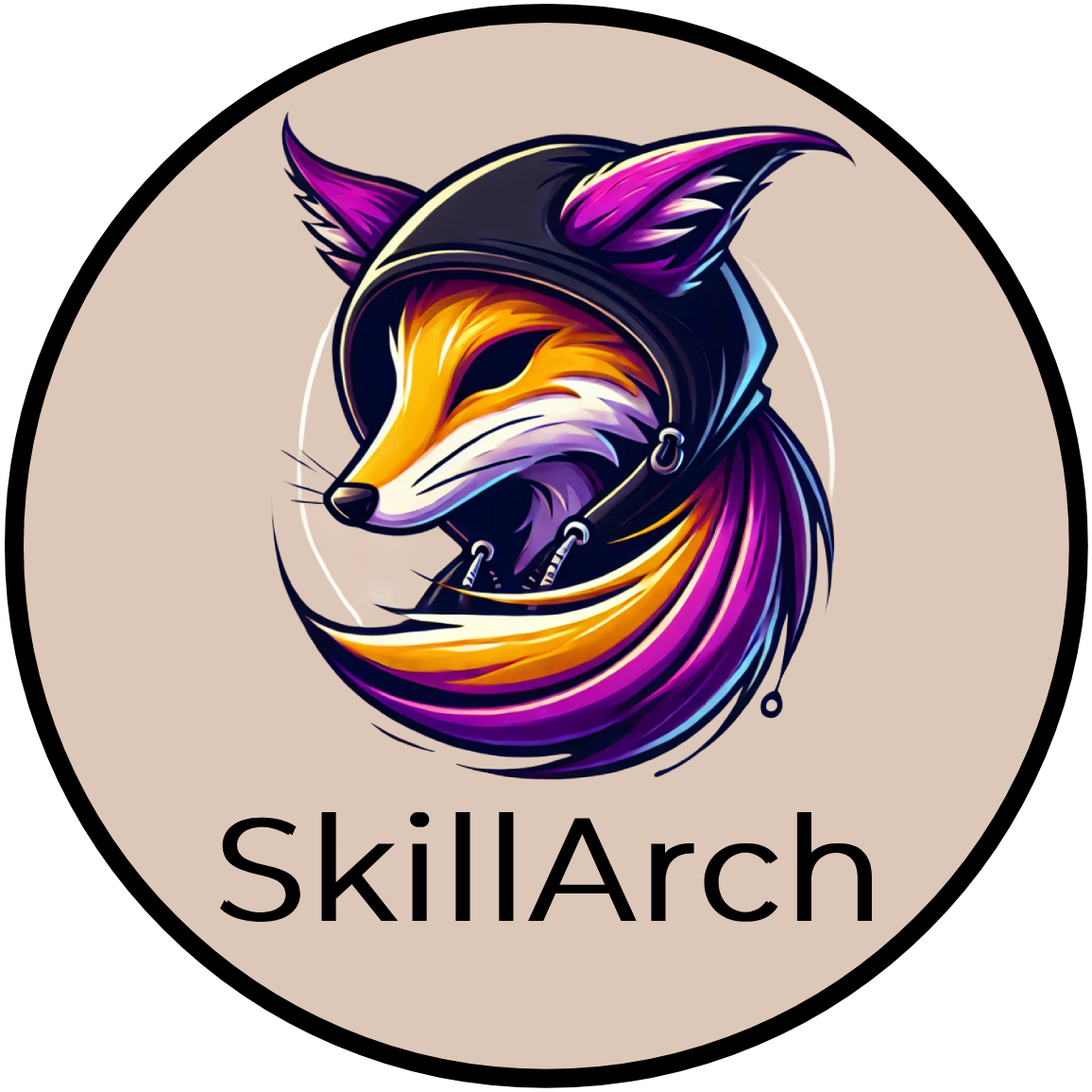
<style>
.page{position:relative;width:1092px;height:1092px;background:#ddc7b8}
.page>*{position:absolute;margin:0}
.t1{font:146.4px "Montserrat-Regular";color:#000000;font-weight:bold}
</style>
<div class="page">
<p class="t1" style="left:220px;top:812px;width:652px;height:109px">SkillArch</p>
</div>
